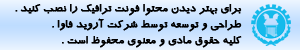
<style>
.page{position:relative;width:300px;height:50px}
.page>*{position:absolute;margin:0}
.t1{font:12px "BTraffic";color:#000000;font-weight:bold}
</style>
<div class="page">
<p class="t1" style="left:15px;top:4px;width:227px;height:12px">برای بهتر دیدن محتوا فونت ترافیک را نصب کنید .</p>
<p class="t1" style="left:52px;top:18px;width:190px;height:14px">طراحی و توسعه توسط شرکت آروید فاوا .</p>
<p class="t1" style="left:62px;top:36px;width:180px;height:12px">کلیه حقوق مادی و معنوی محفوظ است .</p>
</div>
